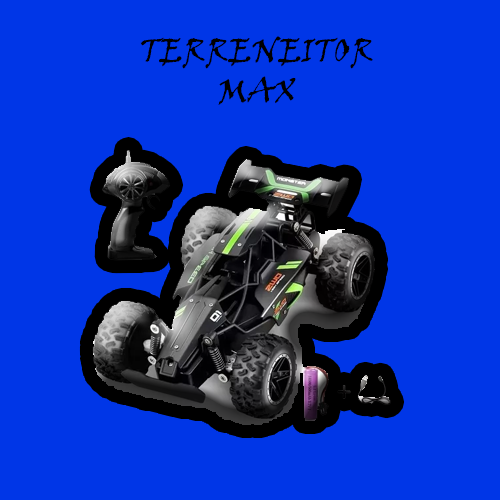
<style>
.page{position:relative;width:500px;height:500px;background:#0036e7}
.page>*{position:absolute;margin:0}
.t1{font:33.3px "VinerHandITC";color:#000000}
</style>
<div class="page">
<p class="t1" style="left:140px;top:36px;width:233px;height:69px;text-align:center">TERRENEITOR<br>MAX</p>
</div>
